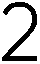
<style>
.page{position:relative;width:40px;height:64px;background:#ffffff}
.page>*{position:absolute;margin:0}
.t1{font:74px "OPPOSans-R";color:#000000}
</style>
<div class="page">
<p class="t1" style="left:2px;top:2px;width:35px;height:59px">2</p>
</div>
